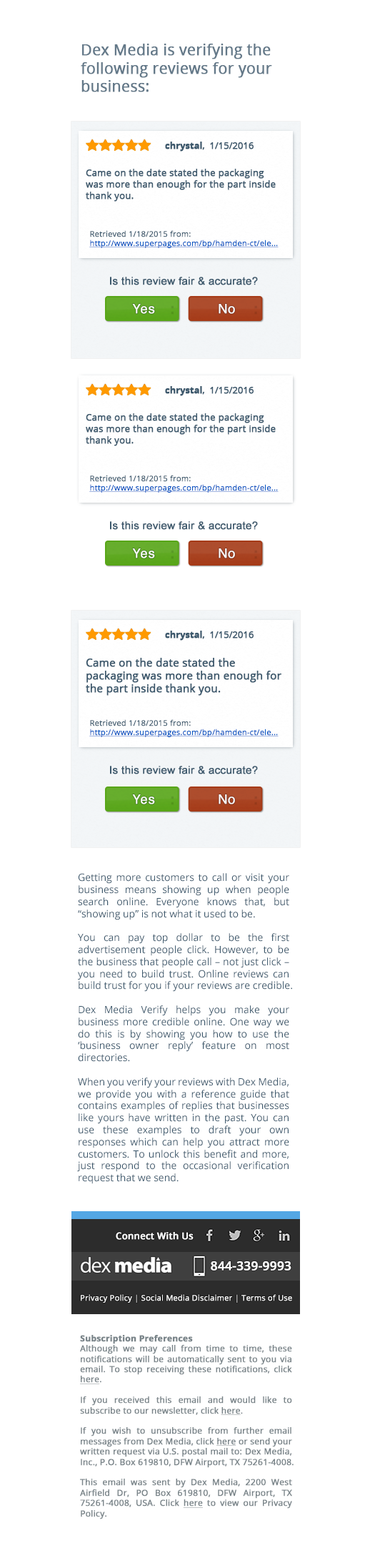
<style>
.page{position:relative;width:370px;height:1568px;background:#ffffff}
.page>*{position:absolute;margin:0}
.t1{font:15px "OpenSans";color:#647989;font-weight:bold}
.t2{font:9.3px "OpenSans";letter-spacing:-0.025em;color:#3d596d;font-weight:bold}
.t3{font:9.3px "OpenSans-Bold";letter-spacing:-0.025em;color:#3d596d;font-weight:bold}
.t4{font:9.3px "OpenSans";color:#3d596d;font-weight:bold}
.t5{font:7.9px "OpenSans";color:#0152c1;font-weight:bold;text-decoration:underline}
.t6{font:7.9px "OpenSans";color:#3d596d;font-weight:bold}
.t7{font:10.7px "ArialMT";color:#3d596d;font-weight:bold}
.t8{font:12.8px "Helvetica";letter-spacing:0.03em;color:#ffffff;font-weight:bold}
.t9{font:13.6px "HelveticaNeue-Bold";letter-spacing:0.1em;color:#569820;font-weight:bold}
.t10{font:13.6px "HelveticaNeue-Bold";letter-spacing:0.1em;color:#993f22;font-weight:bold}
.t11{font:10.7px "OpenSans";color:#3d596d;font-weight:bold}
.t12{font:10px "OpenSans";color:#3d596d}
.t13{font:9.3px "OpenSans-Semibold";color:#ffffff;font-weight:bold}
.t14{font:12.2px "OpenSans-Semibold";color:#ffffff;font-weight:bold}
.t15{font:7.9px "OpenSans";color:#ffffff;font-weight:bold}
.t16{font:7.9px "OpenSans";color:#bdbdbd;font-weight:bold}
.t17{font:7.9px "OpenSans";color:#c1c1c1;font-weight:bold}
.t18{font:8.6px "OpenSans";color:#798489;font-weight:bold}
.t19{font:8.6px "OpenSans-Bold";color:#798489;font-weight:bold}
.t20{font:8.6px "OpenSans";color:#798489;font-weight:bold;text-decoration:underline}
</style>
<div class="page">
<p class="t1" style="left:81px;top:44px;width:191px;height:48px">Dex Media is verifying the following reviews for your business:</p>
<p class="t2" style="left:165px;top:142px;width:89px;height:10px"><span class="t3">chrystal</span>,  1/15/2016</p>
<p class="t4" style="left:86px;top:169px;width:190px;height:33px">Came on the date stated the packaging was more than enough for the part inside thank you.</p>
<p class="t5" style="left:89px;top:230px;width:190px;height:18px"><span class="t6">Retrieved 1/18/2015 from: </span>http://www.superpages.com/bp/hamden-ct/ele...</p>
<p class="t7" style="left:110px;top:277px;width:148px;height:8px">Is this review fair &amp; accurate?</p>
<p class="t8" style="left:132px;top:304px;width:23px;height:10px">Yes</p>
<p class="t9" style="left:171px;top:305px;width:3px;height:10px;rotate:-90deg">..</p>
<p class="t8" style="left:219px;top:304px;width:16px;height:10px">No</p>
<p class="t10" style="left:255px;top:305px;width:2px;height:10px;rotate:-90deg">..</p>
<p class="t2" style="left:165px;top:386px;width:89px;height:10px"><span class="t3">chrystal</span>,  1/15/2016</p>
<p class="t4" style="left:86px;top:413px;width:190px;height:33px">Came on the date stated the packaging was more than enough for the part inside thank you.</p>
<p class="t5" style="left:89px;top:475px;width:190px;height:18px"><span class="t6">Retrieved 1/18/2015 from: </span>http://www.superpages.com/bp/hamden-ct/ele...</p>
<p class="t7" style="left:110px;top:521px;width:148px;height:9px">Is this review fair &amp; accurate?</p>
<p class="t8" style="left:132px;top:548px;width:23px;height:10px">Yes</p>
<p class="t9" style="left:171px;top:550px;width:3px;height:9px;rotate:-90deg">..</p>
<p class="t8" style="left:219px;top:548px;width:16px;height:10px">No</p>
<p class="t10" style="left:255px;top:550px;width:2px;height:9px;rotate:-90deg">..</p>
<p class="t2" style="left:165px;top:631px;width:89px;height:10px"><span class="t3">chrystal</span>,  1/15/2016</p>
<p class="t11" style="left:86px;top:658px;width:196px;height:38px">Came on the date stated the packaging was more than enough for the part inside thank you.</p>
<p class="t5" style="left:89px;top:719px;width:190px;height:18px"><span class="t6">Retrieved 1/18/2015 from: </span>http://www.superpages.com/bp/hamden-ct/ele...</p>
<p class="t7" style="left:110px;top:766px;width:148px;height:8px">Is this review fair &amp; accurate?</p>
<p class="t8" style="left:132px;top:794px;width:23px;height:10px">Yes</p>
<p class="t9" style="left:171px;top:796px;width:3px;height:9px;rotate:-90deg">..</p>
<p class="t8" style="left:219px;top:794px;width:16px;height:10px">No</p>
<p class="t10" style="left:255px;top:796px;width:2px;height:9px;rotate:-90deg">..</p>
<p class="t12" style="left:77px;top:873px;width:215px;height:311px;text-align:justify">Getting more customers to call or visit your business means showing up when people search online. Everyone knows that, but “showing up” is not what it used to be. <br><br>You can pay top dollar to be the first advertisement people click. However, to be the business that people call – not just click – you need to build trust. Online reviews can build trust for you if your reviews are credible. <br><br>Dex Media Verify helps you make your business more credible online. One way we do this is by showing you how to use the ‘business owner reply’ feature on most directories. <br><br>When you verify your reviews with Dex Media, we provide you with a reference guide that contains examples of replies that businesses like yours have written in the past. You can use these examples to draft your own responses which can help you attract more customers. To unlock this benefit and more, just respond to the occasional verification request that we send.</p>
<p class="t13" style="left:116px;top:1232px;width:78px;height:8px">Connect With Us</p>
<p class="t14" style="left:211px;top:1261px;width:81px;height:10px">844-339-9993</p>
<p class="t15" style="left:81px;top:1294px;width:211px;height:9px">Privacy Policy <span class="t16">|</span> Social Media Disclaimer <span class="t17">|</span> Terms of Use</p>
<p class="t18" style="left:80px;top:1335px;width:214px;height:184px;text-align:justify"><span class="t19">Subscription Preferences<br></span>Although we may call from time to time, these notifications will be automatically sent to you via email. To stop receiving these notifications, click <span class="t20">here</span>. <br><br>If you received this email and would like to subscribe to our newsletter, click <span class="t20">here</span>.<br> <br>If you wish to unsubscribe from further email messages from Dex Media, click <span class="t20">here</span> or send your written request via U.S. postal mail to: Dex Media, Inc., P.O. Box 619810, DFW Airport, TX 75261-4008.<br> <br>This email was sent by Dex Media, 2200 West Airfield Dr, PO Box 619810, DFW Airport, TX 75261-4008, USA. Click <span class="t20">here</span> to view our Privacy Policy.<br> <br>© 2016 Dex Media. All rights reserved.</p>
</div>
